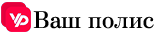
<style>
.page{position:relative;width:155px;height:37px;background:#ffffff}
.page>*{position:absolute;margin:0}
.t1{font:23px "ZenAntique-Regular";color:#000000}
</style>
<div class="page">
<p class="t1" style="left:33px;top:11px;width:121px;height:18px">Ваш полис</p>
</div>
